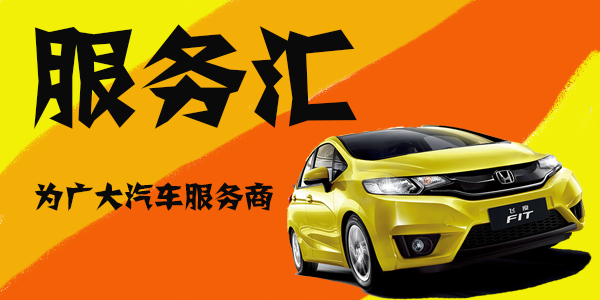
<style>
.page{position:relative;width:600px;height:300px;background:#f36008}
.page>*{position:absolute;margin:0}
.t1{font:110px "FZJZJW--GB1-0";color:#0a0a0a}
.t2{font:30px "FZJZJW--GB1-0";color:#0a0a0a}
</style>
<div class="page">
<p class="t1" style="left:34px;top:24px;width:323px;height:106px">服务汇</p>
<p class="t2" style="left:34px;top:181px;width:240px;height:30px">为广大汽车服务商</p>
</div>
